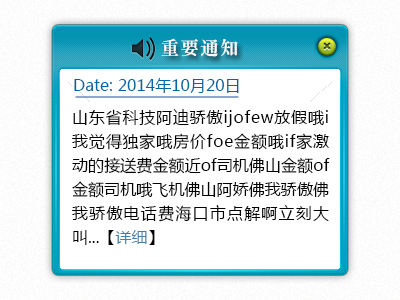
<style>
.page{position:relative;width:400px;height:300px;background:#ffffff}
.page>*{position:absolute;margin:0}
.t1{font:18px "GBInnMing-Heavy";letter-spacing:0.1em;color:#ffffff}
.t2{font:16px "MicrosoftYaHei";color:#0067a1}
.t3{font:16px/24px "MicrosoftYaHei";color:#000000}
.t4{font:16px/24px "MicrosoftYaHei";color:#4281af}
</style>
<div class="page">
<p class="t1" style="left:161px;top:38px;width:77px;height:19px">重要通知</p>
<p class="t2" style="left:74px;top:78px;width:165px;height:15px">Date: 2014年10月20日</p>
<p class="t3" style="left:72px;top:109px;width:258px;height:136px;text-align:justify">山东省科技阿迪骄傲ijofew放假哦i我觉得独家哦房价foe金额哦if家激动的接送费金额近of司机佛山金额of金额司机哦飞机佛山阿娇佛我骄傲佛我骄傲电话费海口市点解啊立刻大叫...【<span class="t4">详细</span>】</p>
</div>
